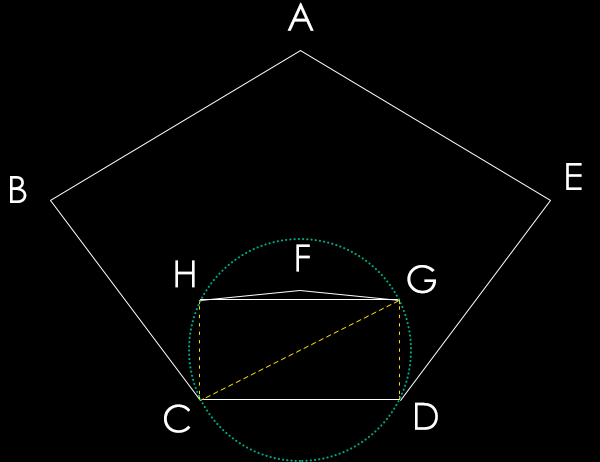
<style>
.page{position:relative;width:600px;height:462px;background:#000000}
.page>*{position:absolute;margin:0}
.t1{font:37.5px "STHeiti";color:#ffffff}
</style>
<div class="page">
<p class="t1" style="left:287px;top:2px;width:27px;height:29px">A</p>
<p class="t1" style="left:566px;top:163px;width:16px;height:27px">E</p>
<p class="t1" style="left:10px;top:176px;width:17px;height:27px">B</p>
<p class="t1" style="left:296px;top:244px;width:14px;height:28px">F</p>
<p class="t1" style="left:175px;top:260px;width:20px;height:28px">H</p>
<p class="t1" style="left:407px;top:265px;width:29px;height:29px">G</p>
<p class="t1" style="left:164px;top:404px;width:27px;height:29px">C</p>
<p class="t1" style="left:415px;top:402px;width:23px;height:28px">D</p>
</div>
